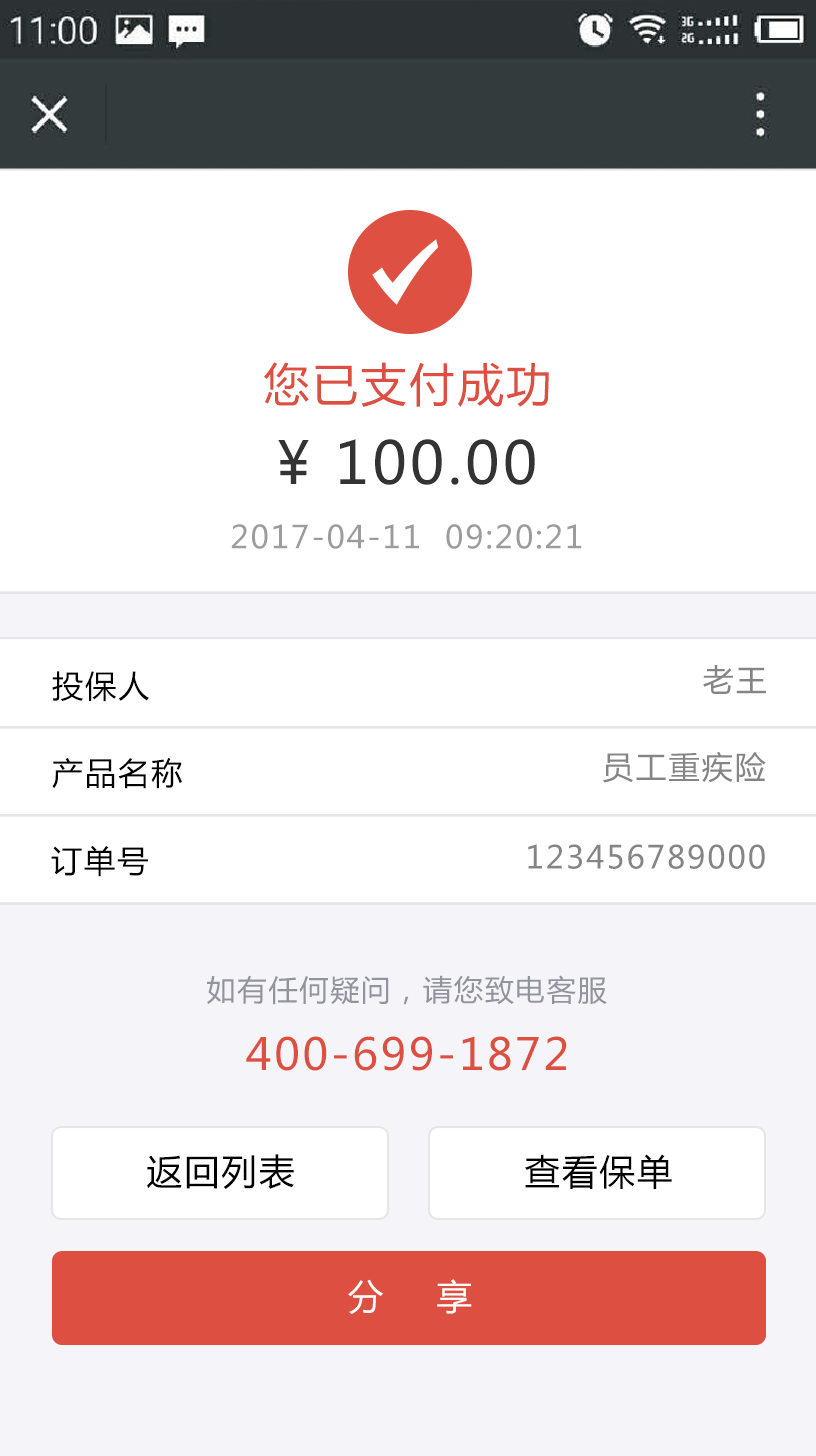
<style>
.page{position:relative;width:816px;height:1456px;background:#ffffff}
.page>*{position:absolute;margin:0}
.t1{font:45.8px "MicrosoftYaHei";letter-spacing:0.06em;color:#dd5041}
.t2{font:58.3px "MicrosoftYaHei";letter-spacing:0.06em;color:#333333}
.t3{font:31.2px "MicrosoftYaHei";letter-spacing:0.06em;color:#9c9c9c}
.t4{font:31.2px "MicrosoftYaHei";letter-spacing:0.06em;color:#858585}
.t5{font:31.2px "MicrosoftYaHei";letter-spacing:0.06em;color:#000000}
.t6{font:31.2px "MicrosoftYaHei";letter-spacing:0.06em;color:#030303}
.t7{font:29.2px "MicrosoftYaHei";letter-spacing:0.06em;color:#91939d}
.t8{font:43.7px "MicrosoftYaHei";letter-spacing:0.06em;color:#dd5041}
.t9{font:35.4px "MicrosoftYaHei";letter-spacing:0.06em;color:#000000}
.t10{font:35.4px "MicrosoftYaHei";letter-spacing:1.5em;color:#ffffff}
</style>
<div class="page">
<p class="t1" style="left:264px;top:362px;width:285px;height:45px">您已支付成功</p>
<p class="t2" style="left:278px;top:439px;width:257px;height:46px">¥ 100.00</p>
<p class="t3" style="left:231px;top:524px;width:351px;height:25px">2017-04-11  09:20:21</p>
<p class="t4" style="left:703px;top:665px;width:63px;height:29px">老王</p>
<p class="t5" style="left:52px;top:671px;width:97px;height:31px">投保人</p>
<p class="t6" style="left:52px;top:758px;width:130px;height:31px">产品名称</p>
<p class="t4" style="left:603px;top:751px;width:163px;height:32px">员工重疾险</p>
<p class="t5" style="left:51px;top:845px;width:97px;height:32px">订单号</p>
<p class="t4" style="left:528px;top:844px;width:237px;height:25px">123456789000</p>
<p class="t7" style="left:207px;top:975px;width:400px;height:30px">如有任何疑问，请您致电客服</p>
<p class="t8" style="left:246px;top:1036px;width:321px;height:35px">400-699-1872</p>
<p class="t9" style="left:147px;top:1154px;width:147px;height:35px">返回列表</p>
<p class="t9" style="left:525px;top:1154px;width:147px;height:35px">查看保单</p>
<p class="t10" style="left:348px;top:1279px;width:124px;height:35px">分享</p>
</div>
